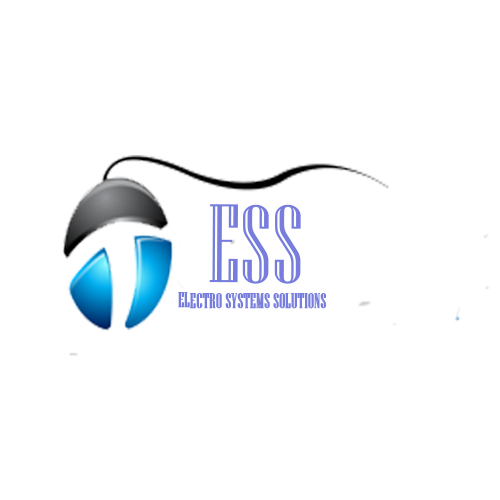
<style>
.page{position:relative;width:500px;height:500px;background:#ffffff}
.page>*{position:absolute;margin:0}
.t1{font:21px "NiagaraEngraved-Reg";color:#767ddc}
.t2{font:110.9px "NiagaraEngraved-Reg";color:#767ddc}
</style>
<div class="page">
<p class="t1" style="left:178px;top:204px;width:148px;height:105px;text-align:center"><span class="t2">    ESS<br>                    </span>  ELECTRO SYSTEMS SOLUTIONS</p>
</div>
